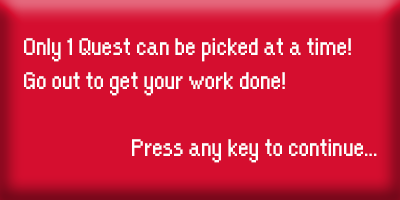
<style>
.page{position:relative;width:400px;height:200px;background:#d50e2f}
.page>*{position:absolute;margin:0}
.t1{font:28px "OrangeKid-Regular";color:#ffffff}
</style>
<div class="page">
<p class="t1" style="left:24px;top:38px;width:353px;height:125px">Only 1 Quest can be picked at a time!<br>Go out to get your work done!<br><br>   Press any key to continue...</p>
</div>
